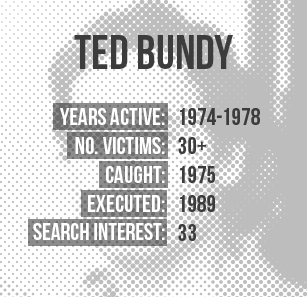
<style>
.page{position:relative;width:307px;height:297px;background:#ffffff}
.page>*{position:absolute;margin:0}
.t1{font:48px "BebasNeue";color:#3c3c3c}
.t2{font:24px "BebasNeue";color:#ffffff}
.t3{font:24px/125px "BebasNeue";color:#ffffff}
.t4{font:24px "BebasNeue";color:#3c3c3c}
.t5{font:24px/125px "BebasNeue";color:#3c3c3c}
</style>
<div class="page">
<p class="t1" style="left:74px;top:35px;width:159px;height:34px">TED BUNDY</p>
<p class="t2" style="left:33px;top:108px;width:132px;height:132px;text-align:right"><span class="t3">YEARS ACTIVE:<br></span>No. Victims:<br>cAUGHT:<br>EXECUTED:<br>SEARCH INTEREST:</p>
<p class="t4" style="left:178px;top:108px;width:82px;height:133px"><span class="t5">1974-1978</span><br>30+<br>1975<br>1989<br>33</p>
</div>
